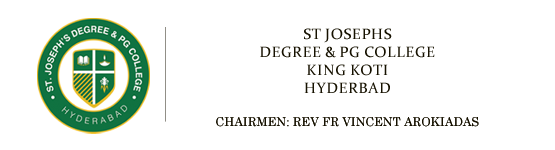
<style>
.page{position:relative;width:555px;height:150px;background:#ffffff}
.page>*{position:absolute;margin:0}
.t1{font:15px "Constantia";color:#161100;text-transform:uppercase}
.t2{font:12px "CenturySchoolbook";color:#161100;text-transform:uppercase}
</style>
<div class="page">
<p class="t1" style="left:216px;top:28px;width:263px;height:99px;text-align:center">ST Josephs <br>Degree &amp; Pg college<br>king Koti<br>Hyderbad <br><br><span class="t2">Chairmen: Rev Fr vincent arokiadas</span></p>
</div>
